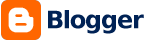
<style>
.page{position:relative;width:150px;height:40px;background:#ffffff}
.page>*{position:absolute;margin:0}
.t1{font:24px "BitstreamVeraSans-Bold";letter-spacing:-0.05em;color:#002255}
</style>
<div class="page">
<p class="t1" style="left:48px;top:10px;width:96px;height:24px">Blogger</p>
</div>
